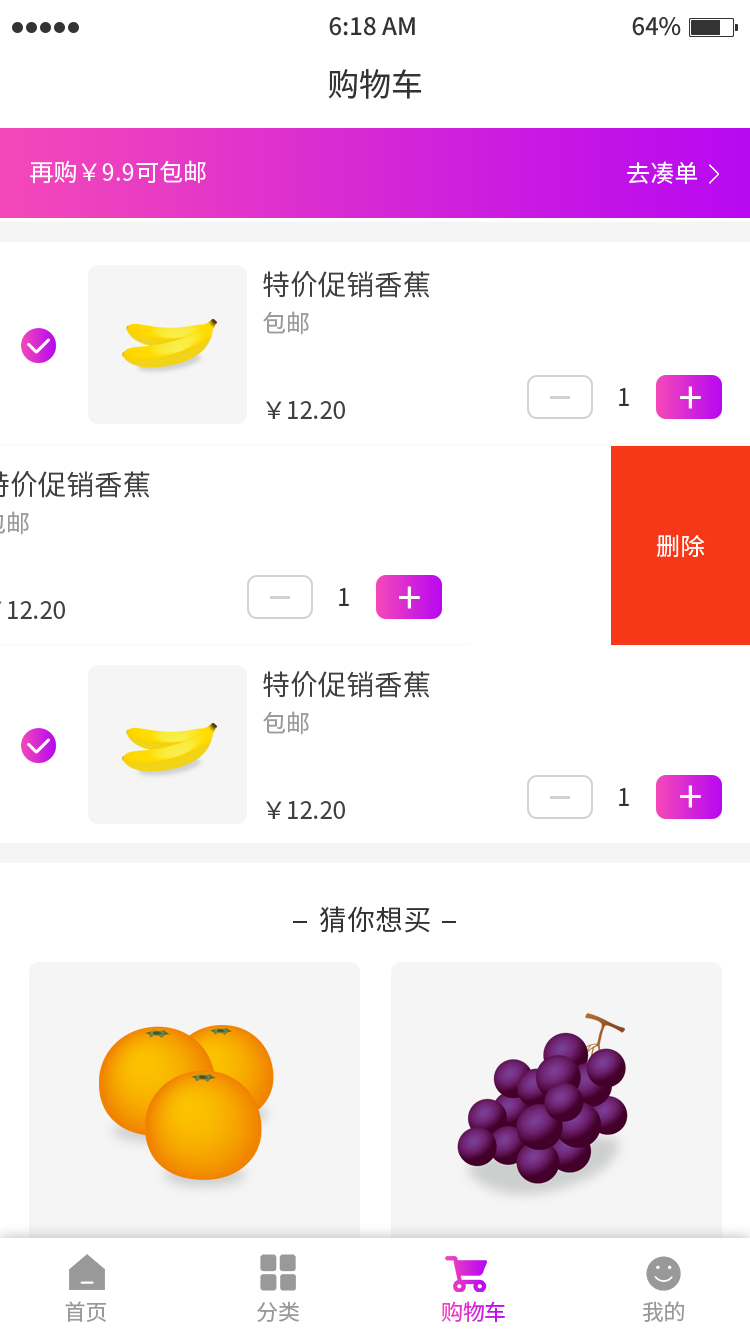
<style>
.page{position:relative;width:750px;height:1334px;background:#ffffff}
.page>*{position:absolute;margin:0}
.t1{font:32px "NotoSansHans-Regular";color:#333333}
.t2{font:24px "NotoSansHans-Regular";color:#fefefe}
.t3{font:28.1px "NotoSansHans-Regular";color:#404040}
.t4{font:24px "NotoSansHans-Regular";color:#9b9b9b}
.t5{font:24px "NotoSansHans-Regular";color:#323232}
.t6{font:43.8px "NotoSansHans-Regular";color:#ffffff}
.t7{font:24px "NotoSansHans-Regular";color:#404040}
.t8{font:24px "NotoSansHans-Regular";color:#ffffff}
.t9{font:28px "NotoSansHans-Regular";color:#323232}
.t10{font:22px "NotoSansHans-Regular";letter-spacing:-0.02em;color:#999999}
.t11{font:22px "NotoSansHans-Regular";letter-spacing:-0.02em}
</style>
<div class="page">
<p class="t1" style="left:328px;top:69px;width:94px;height:30px">购物车</p>
<p class="t2" style="left:30px;top:160px;width:176px;height:24px">再购￥9.9可包邮</p>
<p class="t2" style="left:627px;top:161px;width:71px;height:23px">去凑单</p>
<p class="t3" style="left:263px;top:271px;width:167px;height:27px">特价促销香蕉</p>
<p class="t4" style="left:263px;top:311px;width:46px;height:24px">包邮</p>
<p class="t5" style="left:619px;top:388px;width:10px;height:18px">1</p>
<p class="t6" style="left:680px;top:386px;width:21px;height:23px">+</p>
<p class="t7" style="left:266px;top:401px;width:79px;height:18px">￥12.20</p>
<p class="t8" style="left:657px;top:534px;width:48px;height:23px">删除</p>
<p class="t5" style="left:339px;top:588px;width:10px;height:18px">1</p>
<p class="t6" style="left:399px;top:586px;width:21px;height:23px">+</p>
<p class="t3" style="left:263px;top:671px;width:167px;height:27px">特价促销香蕉</p>
<p class="t4" style="left:263px;top:711px;width:46px;height:24px">包邮</p>
<p class="t6" style="left:680px;top:785px;width:21px;height:23px">+</p>
<p class="t5" style="left:619px;top:788px;width:10px;height:18px">1</p>
<p class="t7" style="left:266px;top:801px;width:79px;height:18px">￥12.20</p>
<p class="t9" style="left:320px;top:906px;width:110px;height:27px">猜你想买</p>
<p class="t10" style="left:65px;top:1301px;width:42px;height:21px">首页</p>
<p class="t10" style="left:257px;top:1301px;width:43px;height:21px">分类</p>
<p class="t11" style="left:441px;top:1301px;width:64px;height:21px">购物车</p>
<p class="t10" style="left:643px;top:1301px;width:41px;height:21px">我的</p>
</div>
